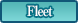
<style>
.page{position:relative;width:78px;height:23px;background:#115777}
.page>*{position:absolute;margin:0}
.t1{font:14px "RyuminPro-ExBold";letter-spacing:-0.08em;color:#ffffff;scale:0.9 1}
</style>
<div class="page">
<p class="t1" style="left:27px;top:5px;width:26px;height:12px">Fleet</p>
</div>
